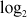
<style>
.page{position:relative;width:27px;height:17px;background:#ffffff}
.page>*{position:absolute;margin:0}
.t1{font:18px "TimesNewRomanPSMT";color:#000000;scale:0.96 1}
</style>
<div class="page">
<p class="t1" style="left:0px;top:0px;width:27px;height:17px">log2</p>
</div>
